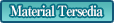
<style>
.page{position:relative;width:114px;height:23px;background:#115777}
.page>*{position:absolute;margin:0}
.t1{font:14px "RyuminPro-ExBold";letter-spacing:-0.08em;color:#ffffff;scale:0.9 1}
</style>
<div class="page">
<p class="t1" style="left:10px;top:5px;width:93px;height:12px">Material Tersedia</p>
</div>
